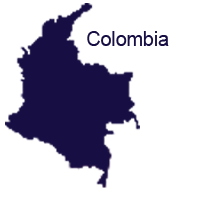
<style>
.page{position:relative;width:200px;height:200px;background:#ffffff}
.page>*{position:absolute;margin:0}
.t1{font:20.8px "ArialMT";color:#170f44;scale:0.94 1}
</style>
<div class="page">
<p class="t1" style="left:87px;top:31px;width:82px;height:15px">Colombia</p>
</div>
